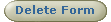
<style>
.page{position:relative;width:111px;height:22px}
.page>*{position:absolute;margin:0}
.t1{font:11px "Verdana-Bold";color:#336699}
</style>
<div class="page">
<p class="t1" style="left:16px;top:5px;width:78px;height:9px">Delete Form</p>
</div>
